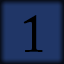
<style>
.page{position:relative;width:64px;height:64px;background:#203667}
.page>*{position:absolute;margin:0}
.t1{font:53.9px "ACaslonPro-Regular";color:#000000}
</style>
<div class="page">
<p class="t1" style="left:23px;top:15px;width:20px;height:37px">1</p>
</div>
